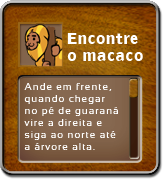
<style>
.page{position:relative;width:163px;height:179px}
.page>*{position:absolute;margin:0}
.t1{font:14px "SansFat";letter-spacing:0.1em;color:#ffffff}
.t2{font:10px "Sansation";letter-spacing:0.1em;color:#ffffff}
</style>
<div class="page">
<p class="t1" style="left:67px;top:33px;width:76px;height:28px">Encontre<br>o macaco</p>
<p class="t2" style="left:24px;top:83px;width:94px;height:67px">Ande em frente,<br>quando chegar<br>no pé de guaraná<br>vire a direita e<br>siga ao norte até<br>a árvore alta.</p>
</div>
